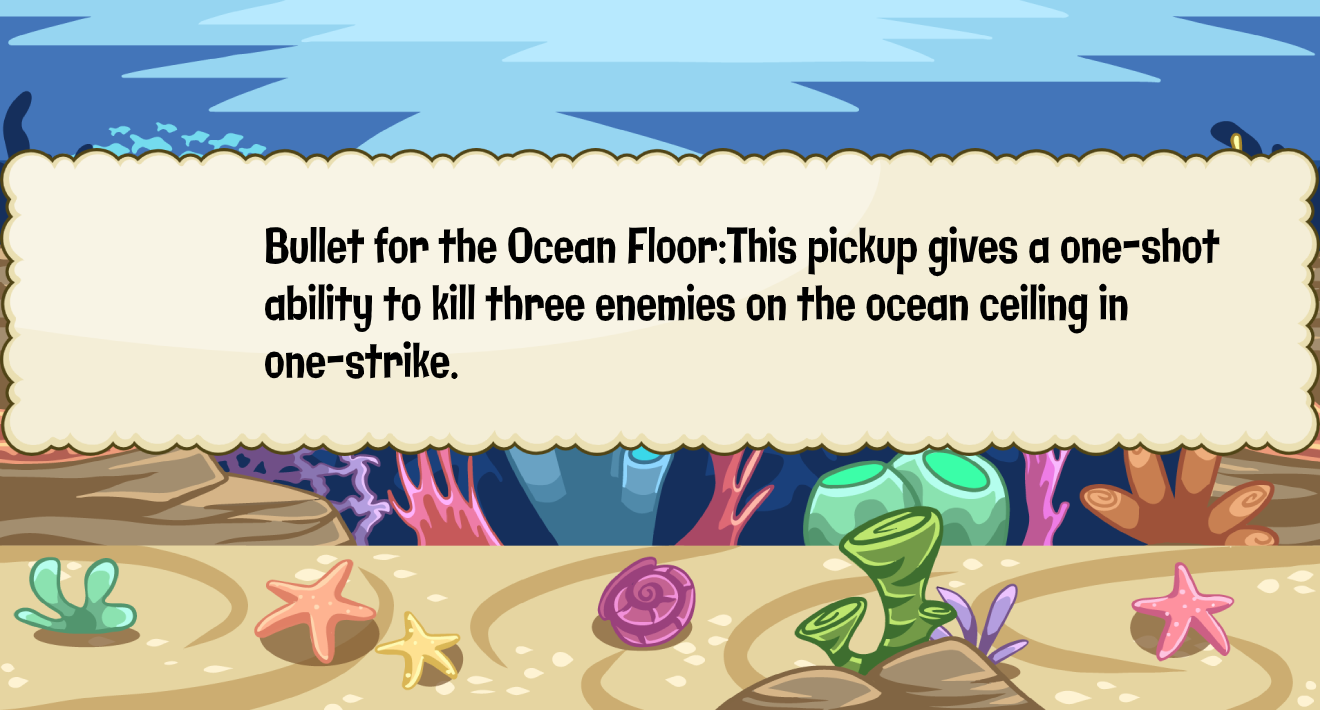
<style>
.page{position:relative;width:1320px;height:710px;background:#f4eed7}
.page>*{position:absolute;margin:0}
.t1{font:47.9px "Galindo-Regular";color:#000000;scale:0.71 1}
</style>
<div class="page">
<p class="t1" style="left:264px;top:226px;width:956px;height:153px">Bullet for the Ocean Floor:This pickup gives a one-shot<br>ability to kill three enemies on the ocean ceiling in <br>one-strike.</p>
</div>
